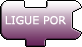
<style>
.page{position:relative;width:82px;height:47px;background:#ffffff}
.page>*{position:absolute;margin:0}
.t1{font:11px "Verdana";color:#ffffff}
</style>
<div class="page">
<p class="t1" style="left:5px;top:16px;width:61px;height:9px">LIGUE POR</p>
</div>
